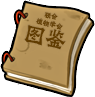
<style>
.page{position:relative;width:95px;height:97px;background:#ffffff}
.page>*{position:absolute;margin:0}
.t1{font:8.1px/8.1px "GraveBustedStoneLishuSCRoughlyC";color:#613c00;scale:0.93 1}
.t2{font:24.8px "GraveBustedStoneLishuSCRoughlyC";color:#613c00;scale:0.96 1}
</style>
<div class="page">
<p class="t1" style="left:36px;top:12px;width:27px;height:18px;text-align:center;rotate:12deg">联合<br>植物学会</p>
<p class="t2" style="left:24px;top:25px;width:42px;height:25px;rotate:12deg">图鉴</p>
</div>
